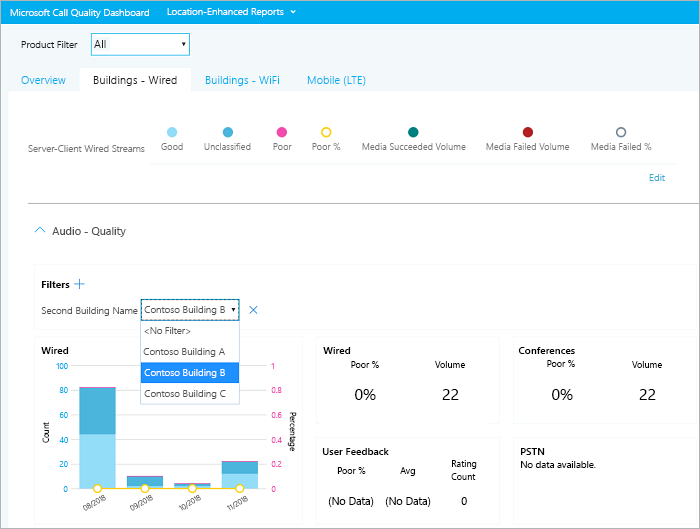
<style>
.page{position:relative;width:700px;height:529px;background:#ffffff}
.page>*{position:absolute;margin:0}
.t1{font:9.9px "SegoeUI-Semilight";color:#ffffff}
.t2{font:9.9px "SegoeUI-Semilight";color:#1b1b1b}
.t3{font:11.5px "SegoeUI-Semilight";color:#1b1b1b}
.t4{font:11.2px "SegoeUI-Semilight";color:#00aeef}
.t5{font:9.7px "SegoeUI-Semilight";color:#757575}
.t6{font:9.3px "SegoeUI-Semilight";color:#757575}
.t7{font:9.9px "SegoeUI-Semilight";color:#35a8d1}
.t8{font:10.9px "SegoeUI";color:#505050}
.t9{font:9.9px "SegoeUI-Bold";color:#000000}
.t10{font:9.9px "SegoeUI-Semilight";color:#505050}
.t11{font:9.6px "SegoeUI-Semilight";color:#505050}
.t12{font:10.1px "SegoeUI-Semibold";color:#000000}
.t13{font:10.1px/13.3px "SegoeUI-Semibold";color:#000000}
.t14{font:9.1px/13.3px "SegoeUI";color:#000000}
.t15{font:8px "SegoeUI-Semilight";color:#00aeef}
.t16{font:8px "SegoeUI-Semilight"}
.t17{font:9.1px "SegoeUI";color:#000000}
.t18{font:8px "SegoeUI-Semilight";color:#f24cae}
.t19{font:16px "SegoeUI";color:#000000}
.t20{font:8.3px "SegoeUI-Semilight";color:#000000}
.t21{font:9.6px/13.3px "SegoeUI";color:#000000}
.t22{font:7.5px "SegoeUI-Light"}
.t23{font:10.7px "SegoeUI";color:#000000}
</style>
<div class="page">
<p class="t1" style="left:10px;top:9px;width:139px;height:9px">Microsoft Call Quality Dashboard</p>
<p class="t1" style="left:167px;top:8px;width:117px;height:9px">Location-Enhanced Reports</p>
<p class="t2" style="left:21px;top:41px;width:57px;height:7px">Product Filter</p>
<p class="t3" style="left:94px;top:40px;width:12px;height:8px">All</p>
<p class="t4" style="left:21px;top:76px;width:45px;height:8px">Overview</p>
<p class="t3" style="left:93px;top:76px;width:84px;height:10px">Buildings - Wired</p>
<p class="t4" style="left:205px;top:76px;width:74px;height:10px">Buildings - WiFi</p>
<p class="t4" style="left:307px;top:76px;width:59px;height:10px">Mobile (LTE)</p>
<p class="t5" style="left:28px;top:145px;width:117px;height:7px">Server-Client Wired Streams</p>
<p class="t6" style="left:161px;top:143px;width:22px;height:7px">Good</p>
<p class="t6" style="left:204px;top:143px;width:47px;height:7px">Unclassified</p>
<p class="t6" style="left:273px;top:143px;width:19px;height:7px">Poor</p>
<p class="t6" style="left:312px;top:143px;width:29px;height:7px">Poor %</p>
<p class="t6" style="left:362px;top:143px;width:104px;height:7px">Media Succeeded Volume</p>
<p class="t6" style="left:486px;top:143px;width:84px;height:7px">Media Failed Volume</p>
<p class="t6" style="left:591px;top:143px;width:61px;height:7px">Media Failed %</p>
<p class="t7" style="left:649px;top:174px;width:16px;height:7px">Edit</p>
<p class="t8" style="left:52px;top:227px;width:74px;height:10px">Audio - Quality</p>
<p class="t9" style="left:41px;top:281px;width:29px;height:7px">Filters</p>
<p class="t10" style="left:41px;top:307px;width:97px;height:9px">Second Building Name</p>
<p class="t10" style="left:144px;top:306px;width:81px;height:9px">Contoso Building B</p>
<p class="t11" style="left:144px;top:327px;width:47px;height:7px">&lt;No Filter&gt;</p>
<p class="t12" style="left:41px;top:347px;width:28px;height:7px">Wired</p>
<p class="t10" style="left:143px;top:348px;width:82px;height:9px">Contoso Building A</p>
<p class="t12" style="left:323px;top:347px;width:28px;height:7px">Wired</p>
<p class="t13" style="left:518px;top:347px;width:57px;height:20px;text-align:right">Conferences<br><span class="t14">Poor %</span></p>
<p class="t15" style="left:56px;top:363px;width:12px;height:6px">100</p>
<p class="t16" style="left:271px;top:363px;width:3px;height:6px">1</p>
<p class="t17" style="left:351px;top:361px;width:28px;height:7px">Poor %</p>
<p class="t17" style="left:435px;top:361px;width:30px;height:7px">Volume</p>
<p class="t17" style="left:632px;top:361px;width:30px;height:7px">Volume</p>
<p class="t1" style="left:144px;top:369px;width:81px;height:9px">Contoso Building B</p>
<p class="t15" style="left:59px;top:387px;width:9px;height:6px">80</p>
<p class="t10" style="left:144px;top:390px;width:82px;height:9px">Contoso Building C</p>
<p class="t18" style="left:271px;top:387px;width:11px;height:6px">0.8</p>
<p class="t19" style="left:355px;top:389px;width:21px;height:11px">0%</p>
<p class="t19" style="left:442px;top:389px;width:17px;height:11px">22</p>
<p class="t19" style="left:552px;top:389px;width:21px;height:11px">0%</p>
<p class="t19" style="left:639px;top:389px;width:17px;height:11px">22</p>
<p class="t15" style="left:59px;top:412px;width:9px;height:6px">60</p>
<p class="t18" style="left:271px;top:412px;width:11px;height:6px">0.6</p>
<p class="t20" style="left:287px;top:412px;width:10px;height:39px;rotate:90deg">Percentage</p>
<p class="t20" style="left:42px;top:422px;width:7px;height:21px;rotate:-90deg">Count</p>
<p class="t15" style="left:59px;top:437px;width:9px;height:6px">40</p>
<p class="t18" style="left:271px;top:437px;width:11px;height:6px">0.4</p>
<p class="t12" style="left:322px;top:448px;width:67px;height:7px">User Feedback</p>
<p class="t21" style="left:521px;top:448px;width:75px;height:20px"><span class="t13">PSTN<br></span>No data available.</p>
<p class="t15" style="left:59px;top:461px;width:9px;height:6px">20</p>
<p class="t18" style="left:271px;top:461px;width:11px;height:6px">0.2</p>
<p class="t14" style="left:451px;top:460px;width:26px;height:20px">Rating<br>Count</p>
<p class="t17" style="left:337px;top:467px;width:29px;height:7px">Poor %</p>
<p class="t17" style="left:400px;top:467px;width:15px;height:9px">Avg</p>
<p class="t15" style="left:63px;top:486px;width:5px;height:6px">0</p>
<p class="t18" style="left:271px;top:486px;width:5px;height:6px">0</p>
<p class="t22" style="left:83px;top:495px;width:23px;height:16px;rotate:-30deg">08/2018</p>
<p class="t22" style="left:130px;top:495px;width:23px;height:16px;rotate:-30deg">09/2018</p>
<p class="t22" style="left:178px;top:495px;width:23px;height:16px;rotate:-30deg">10/2018</p>
<p class="t22" style="left:226px;top:496px;width:22px;height:15px;rotate:-30deg">11/2018</p>
<p class="t23" style="left:328px;top:497px;width:46px;height:10px">(No Data)</p>
<p class="t23" style="left:385px;top:497px;width:46px;height:10px">(No Data)</p>
<p class="t23" style="left:461px;top:497px;width:6px;height:8px">0</p>
</div>
